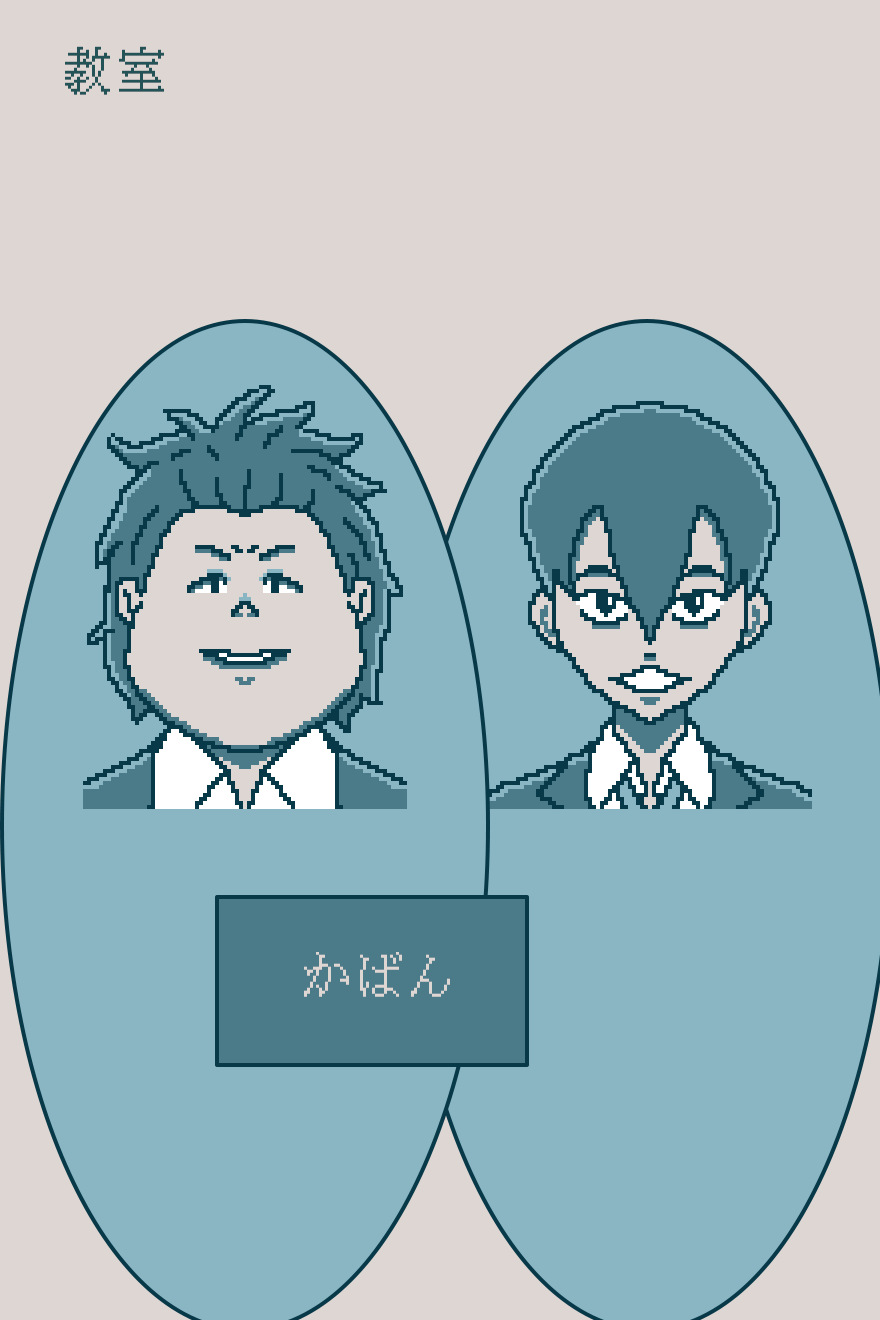
<style>
.page{position:relative;width:880px;height:1320px;background:#8ab6c3}
.page>*{position:absolute;margin:0}
.t1{font:48px "KH-Dot-kagurazaka-16";letter-spacing:0.14em;color:#1e4f5e}
.t2{font:48px "KH-Dot-kagurazaka-16";letter-spacing:0.14em;color:#e0d8d1}
</style>
<div class="page">
<p class="t1" style="left:65px;top:46px;width:99px;height:49px">教室</p>
<p class="t2" style="left:304px;top:952px;width:146px;height:45px">かばん</p>
</div>
